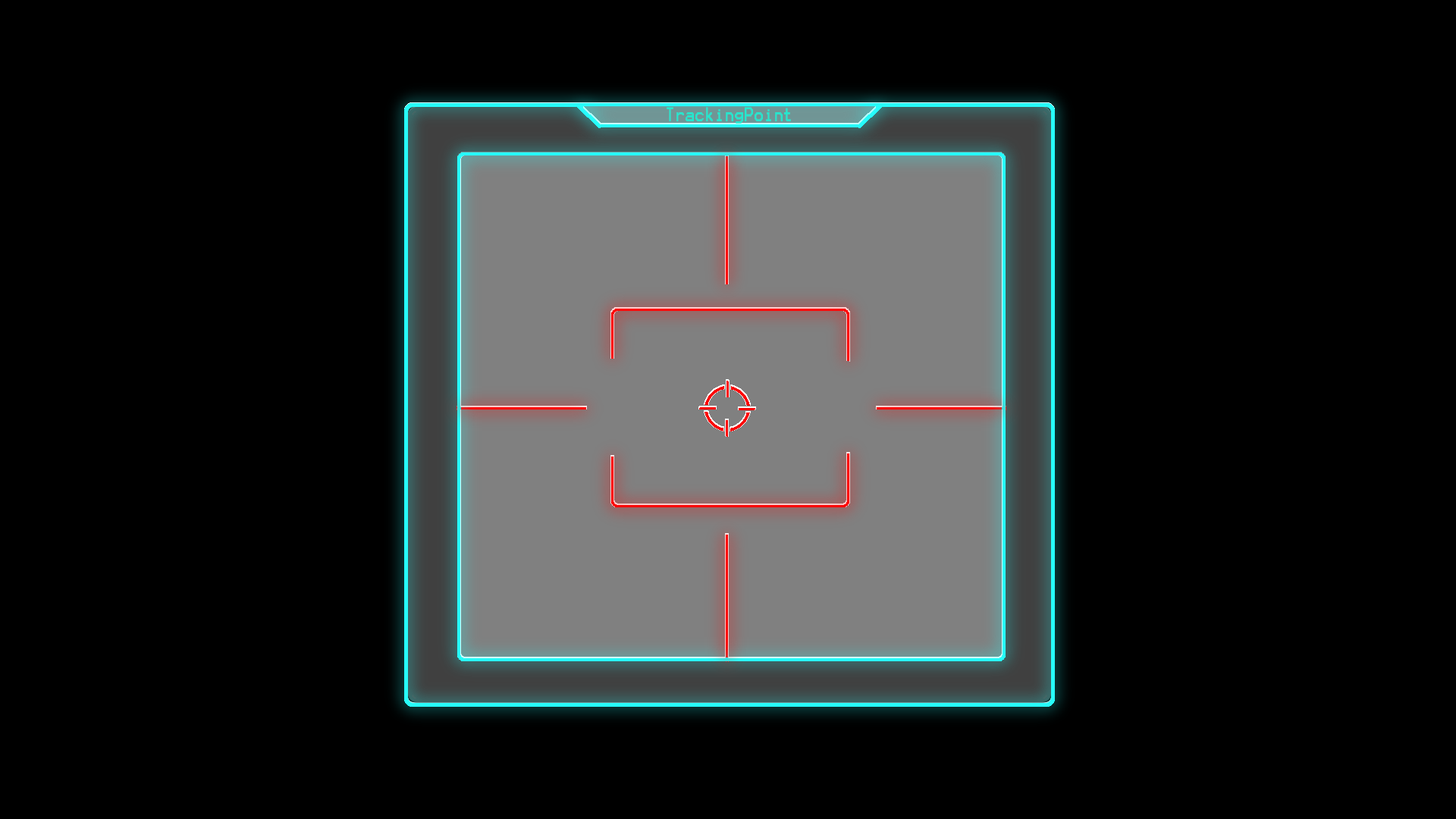
<style>
.page{position:relative;width:1456px;height:819px;background:#000000}
.page>*{position:absolute;margin:0}
.t1{font:16.1px "Terminal";color:#24e7ce;scale:0.82 1}
</style>
<div class="page">
<p class="t1" style="left:667px;top:107px;width:124px;height:17px">TrackingPoint</p>
</div>
